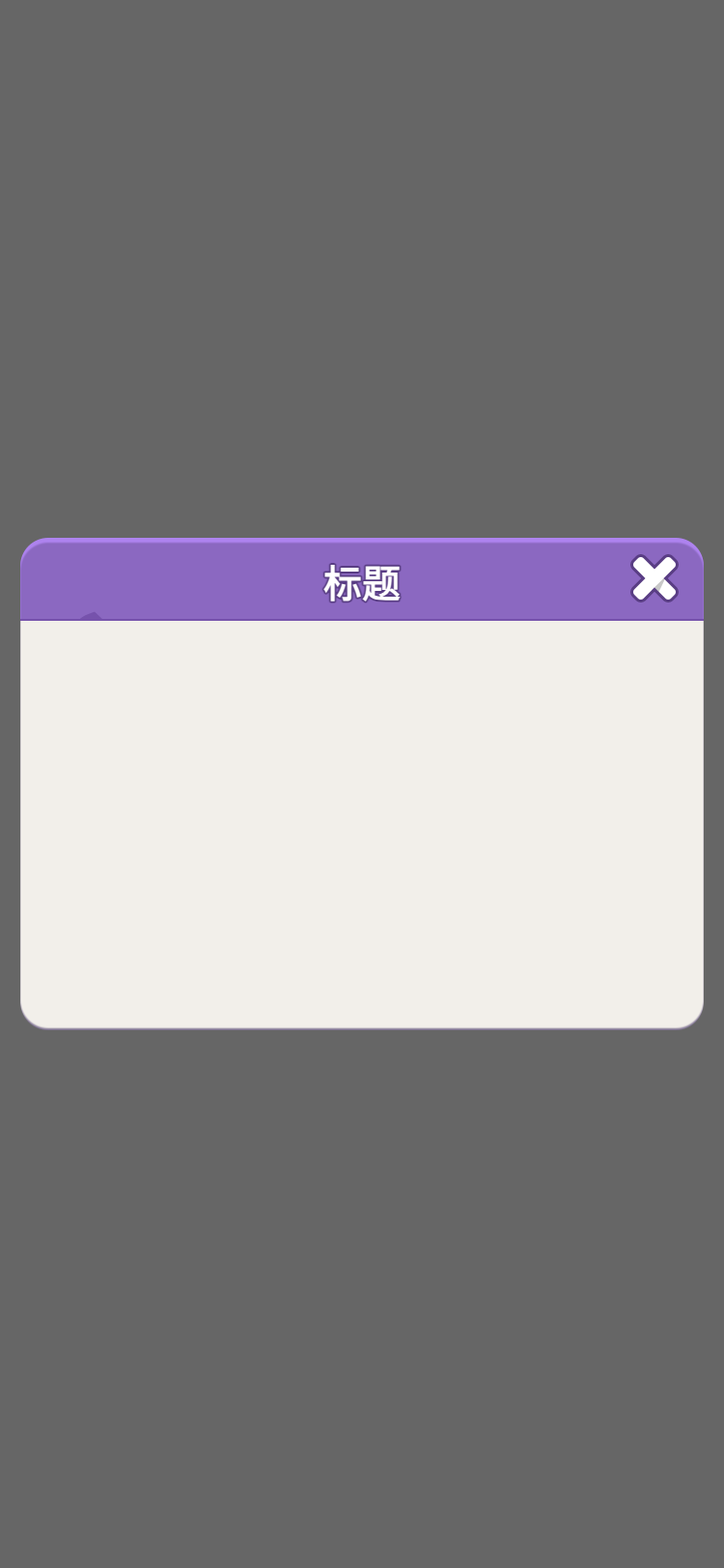
<style>
.page{position:relative;width:724px;height:1568px;background:#666666}
.page>*{position:absolute;margin:0}
.t1{font:38.6px "WebPSD-18463539-0-Regular";color:#ffffff;font-weight:bold}
</style>
<div class="page">
<p class="t1" style="left:107px;top:555px;width:510px;height:56px">标题</p>
</div>
